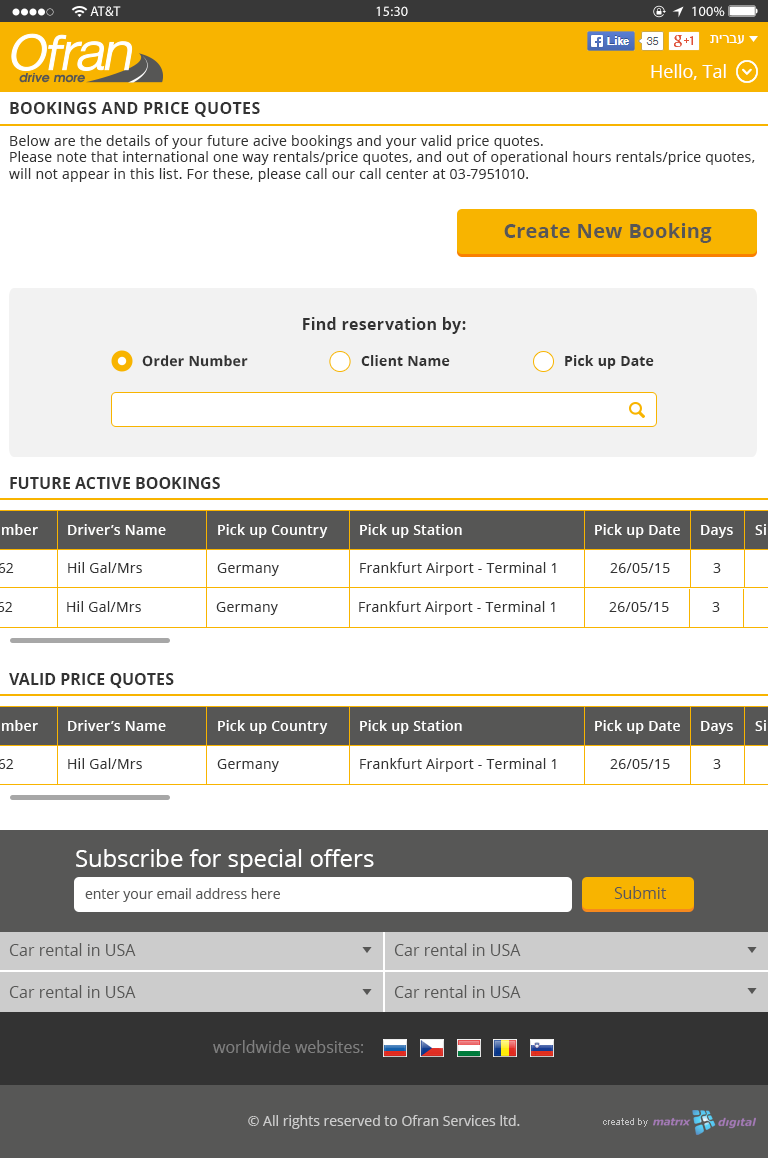
<style>
.page{position:relative;width:768px;height:1158px;background:#ffffff}
.page>*{position:absolute;margin:0}
.t1{font:14px "MyriadPro-Regular";letter-spacing:0.011em;color:#ffffff}
.t2{font:14px "MyriadPro-Regular";letter-spacing:0.02em;color:#ffffff}
.t3{font:14px "ArialMT";color:#ffffff;text-transform:uppercase}
.t4{font:18px "OpenSans";color:#ffffff}
.t5{font:16px "OpenSans-Bold";letter-spacing:0.02em;color:#333333;text-transform:uppercase}
.t6{font:14px "OpenSans";letter-spacing:0.02em;color:#333333}
.t7{font:20px "OpenSans-Bold";letter-spacing:0.02em;color:#575756}
.t8{font:16px "OpenSans-Bold";letter-spacing:0.02em;color:#333333}
.t9{font:14px "OpenSans-Bold";letter-spacing:0.02em;color:#333333}
.t10{font:16px "OpenSans-Bold";color:#333333;text-transform:uppercase}
.t11{font:14px "OpenSans-Semibold";letter-spacing:0.02em;color:#ffffff}
.t12{font:24px "OpenSans";color:#ffffff}
.t13{font:14px "OpenSans";color:#575756}
.t14{font:16px "OpenSans";color:#575756}
.t15{font:16px "OpenSans";color:#808080}
.t16{font:14px "OpenSans";color:#cccccc}
</style>
<div class="page">
<p class="t1" style="left:90px;top:6px;width:31px;height:10px">AT&amp;T</p>
<p class="t2" style="left:376px;top:6px;width:32px;height:10px">15:30</p>
<p class="t2" style="left:692px;top:6px;width:33px;height:10px">100%</p>
<p class="t3" style="left:710px;top:35px;width:34px;height:9px">עברית</p>
<p class="t4" style="left:651px;top:64px;width:75px;height:16px">Hello, Tal</p>
<p class="t5" style="left:10px;top:102px;width:250px;height:15px">bookings and price quotes</p>
<p class="t6" style="left:9px;top:135px;width:746px;height:47px">Below are the details of your future acive bookings and your valid price quotes.<br>Please note that international one way rentals/price quotes, and out of operational hours rentals/price quotes, <br>will not appear in this list. For these, please call our call center at 03-7951010.</p>
<p class="t7" style="left:504px;top:223px;width:208px;height:20px">Create New Booking</p>
<p class="t8" style="left:303px;top:317px;width:163px;height:17px">Find reservation by:</p>
<p class="t9" style="left:142px;top:355px;width:106px;height:12px">Order Number</p>
<p class="t9" style="left:361px;top:355px;width:89px;height:11px">Client Name</p>
<p class="t9" style="left:565px;top:355px;width:89px;height:14px">Pick up Date</p>
<p class="t10" style="left:10px;top:477px;width:210px;height:12px">future active bookings</p>
<p class="t11" style="left:68px;top:524px;width:98px;height:11px">Driver’s Name</p>
<p class="t11" style="left:218px;top:524px;width:110px;height:14px">Pick up Country</p>
<p class="t11" style="left:360px;top:524px;width:102px;height:14px">Pick up Station</p>
<p class="t11" style="left:595px;top:524px;width:85px;height:14px">Pick up Date</p>
<p class="t11" style="left:701px;top:525px;width:32px;height:13px">Days</p>
<p class="t6" style="left:68px;top:562px;width:74px;height:11px">Hil Gal/Mrs</p>
<p class="t6" style="left:217px;top:563px;width:62px;height:13px">Germany</p>
<p class="t6" style="left:360px;top:562px;width:196px;height:14px">Frankfurt Airport - Terminal 1</p>
<p class="t6" style="left:610px;top:563px;width:60px;height:10px">26/05/15</p>
<p class="t6" style="left:713px;top:563px;width:8px;height:10px">3</p>
<p class="t6" style="left:67px;top:601px;width:74px;height:11px">Hil Gal/Mrs</p>
<p class="t6" style="left:216px;top:602px;width:62px;height:13px">Germany</p>
<p class="t6" style="left:359px;top:601px;width:196px;height:14px">Frankfurt Airport - Terminal 1</p>
<p class="t6" style="left:609px;top:602px;width:60px;height:10px">26/05/15</p>
<p class="t6" style="left:712px;top:602px;width:8px;height:10px">3</p>
<p class="t10" style="left:9px;top:673px;width:165px;height:15px">valid price quotes</p>
<p class="t11" style="left:68px;top:720px;width:98px;height:11px">Driver’s Name</p>
<p class="t11" style="left:218px;top:720px;width:110px;height:14px">Pick up Country</p>
<p class="t11" style="left:360px;top:720px;width:102px;height:14px">Pick up Station</p>
<p class="t11" style="left:595px;top:720px;width:85px;height:14px">Pick up Date</p>
<p class="t11" style="left:701px;top:721px;width:32px;height:13px">Days</p>
<p class="t6" style="left:68px;top:758px;width:74px;height:11px">Hil Gal/Mrs</p>
<p class="t6" style="left:217px;top:759px;width:62px;height:13px">Germany</p>
<p class="t6" style="left:360px;top:758px;width:196px;height:14px">Frankfurt Airport - Terminal 1</p>
<p class="t6" style="left:610px;top:759px;width:60px;height:10px">26/05/15</p>
<p class="t6" style="left:713px;top:759px;width:8px;height:10px">3</p>
<p class="t12" style="left:76px;top:849px;width:298px;height:24px">Subscribe for special offers</p>
<p class="t13" style="left:85px;top:888px;width:195px;height:14px">enter your email address here</p>
<p class="t14" style="left:614px;top:886px;width:53px;height:13px">Submit</p>
<p class="t14" style="left:9px;top:943px;width:127px;height:13px">Car rental in USA</p>
<p class="t14" style="left:394px;top:943px;width:127px;height:13px">Car rental in USA</p>
<p class="t14" style="left:9px;top:985px;width:127px;height:13px">Car rental in USA</p>
<p class="t14" style="left:394px;top:985px;width:127px;height:13px">Car rental in USA</p>
<p class="t15" style="left:213px;top:1040px;width:150px;height:13px">worldwide websites:</p>
<p class="t16" style="left:248px;top:1115px;width:272px;height:14px">© All rights reserved to Ofran Services ltd.</p>
</div>
